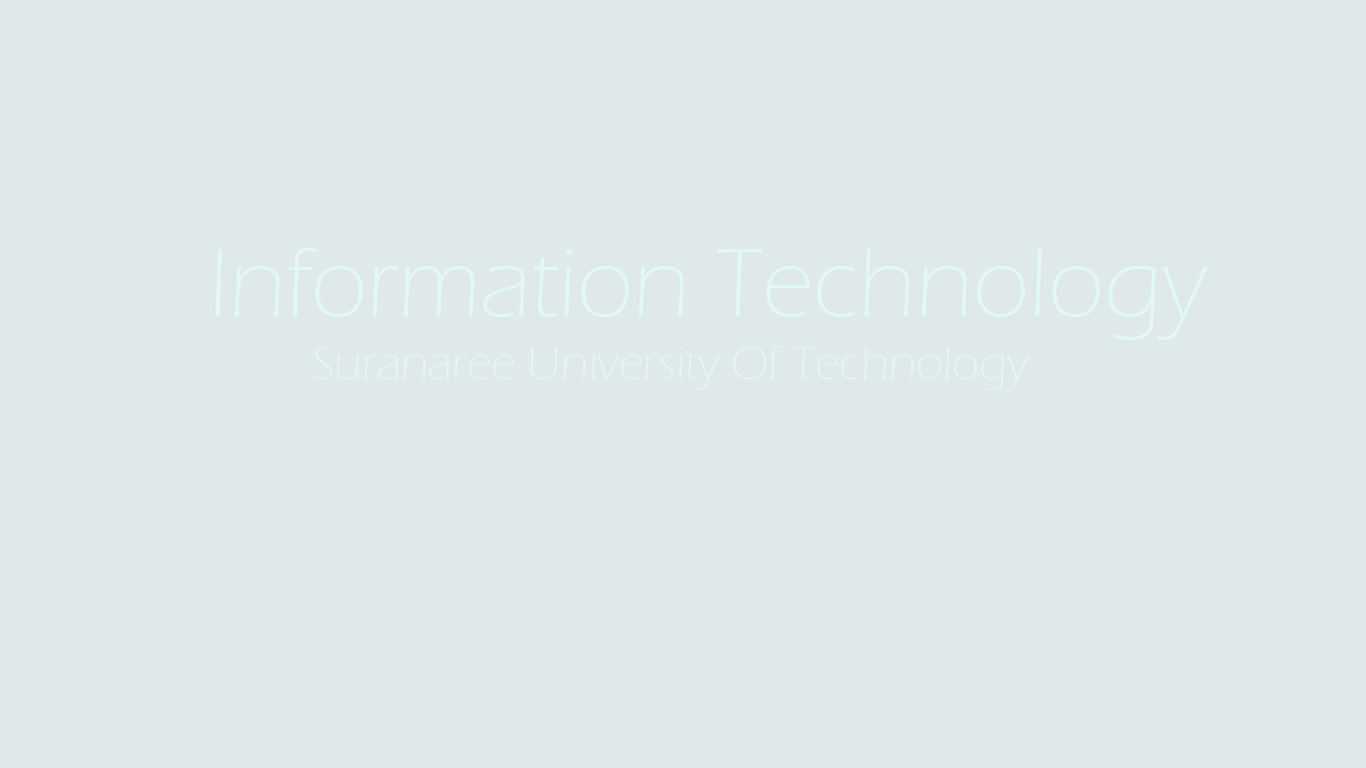
<style>
.page{position:relative;width:1366px;height:768px;background:#dfe9ec}
.page>*{position:absolute;margin:0}
.t1{font:100px "ErasITC-Light";color:#e1f9f6}
.t2{font:18px "canjaew";color:#040404}
.t3{font:48px "ErasITC-Light";color:#e1f7f5}
</style>
<div class="page">
<p class="t1" style="left:215px;top:248px;width:993px;height:92px"><span class="t2"> <br><br><br><br><br><br></span>Information Technology</p>
<p class="t3" style="left:314px;top:346px;width:715px;height:44px">Suranaree University Of Technology</p>
</div>
